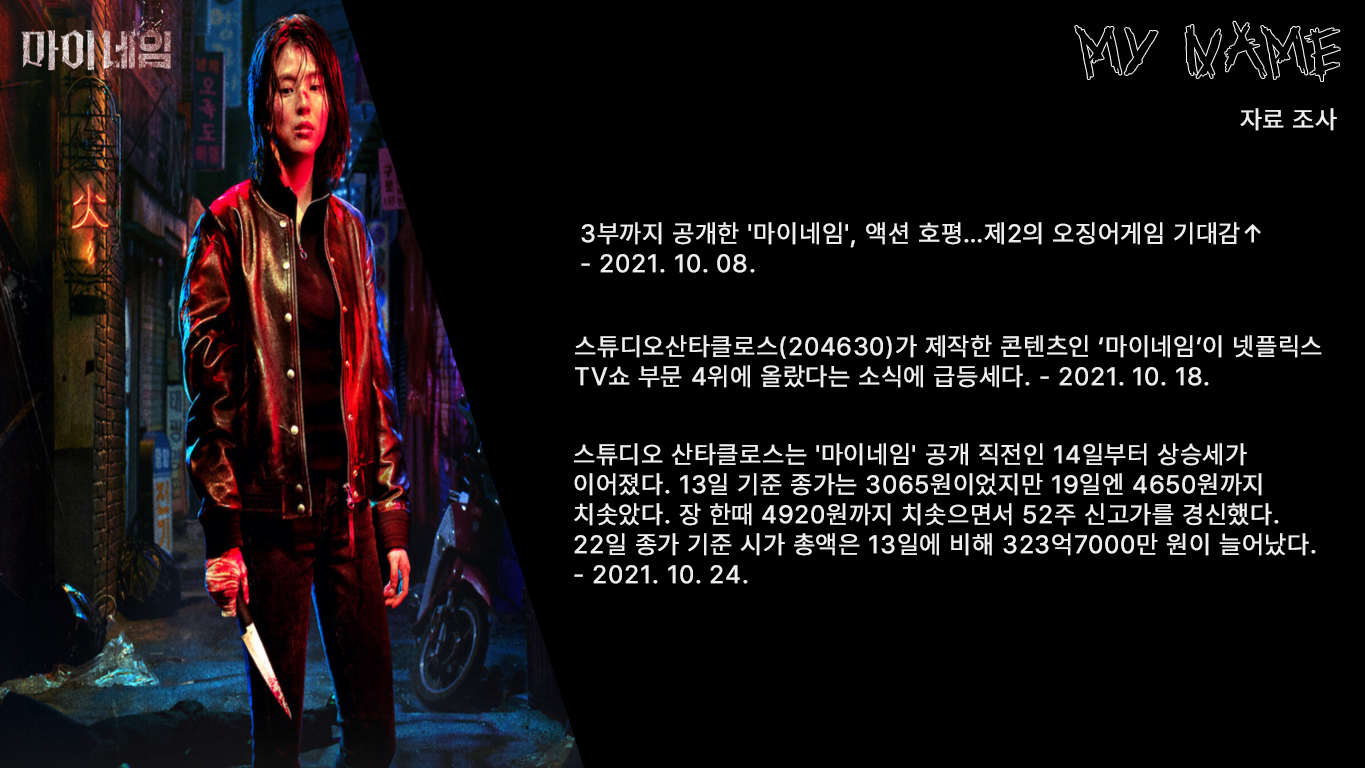
<style>
.page{position:relative;width:1365px;height:768px;background:#000000}
.page>*{position:absolute;margin:0}
.t1{font:25px "Pretendard-Regular";letter-spacing:0.03em;color:#eeeeee;font-weight:bold}
.t2{font:25px/30px "Pretendard-Regular";letter-spacing:0.03em;color:#eeeeee;font-weight:bold}
</style>
<div class="page">
<p class="t1" style="left:1240px;top:108px;width:97px;height:23px">자료 조사</p>
<p class="t2" style="left:581px;top:222px;width:680px;height:51px">3부까지 공개한 '마이네임', 액션 호평…제2의 오징어게임 기대감↑<br>- 2021. 10. 08.</p>
<p class="t2" style="left:575px;top:335px;width:747px;height:53px">스튜디오산타클로스(204630)가 제작한 콘텐츠인 ‘마이네임’이 넷플릭스 <br>TV쇼 부문 4위에 올랐다는 소식에 급등세다. - 2021. 10. 18.</p>
<p class="t2" style="left:574px;top:443px;width:742px;height:141px">스튜디오 산타클로스는 '마이네임' 공개 직전인 14일부터 상승세가 <br>이어졌다. 13일 기준 종가는 3065원이었지만 19일엔 4650원까지 <br>치솟았다. 장 한때 4920원까지 치솟으면서 52주 신고가를 경신했다. <br>22일 종가 기준 시가 총액은 13일에 비해 323억7000만 원이 늘어났다.<br>- 2021. 10. 24.</p>
</div>
